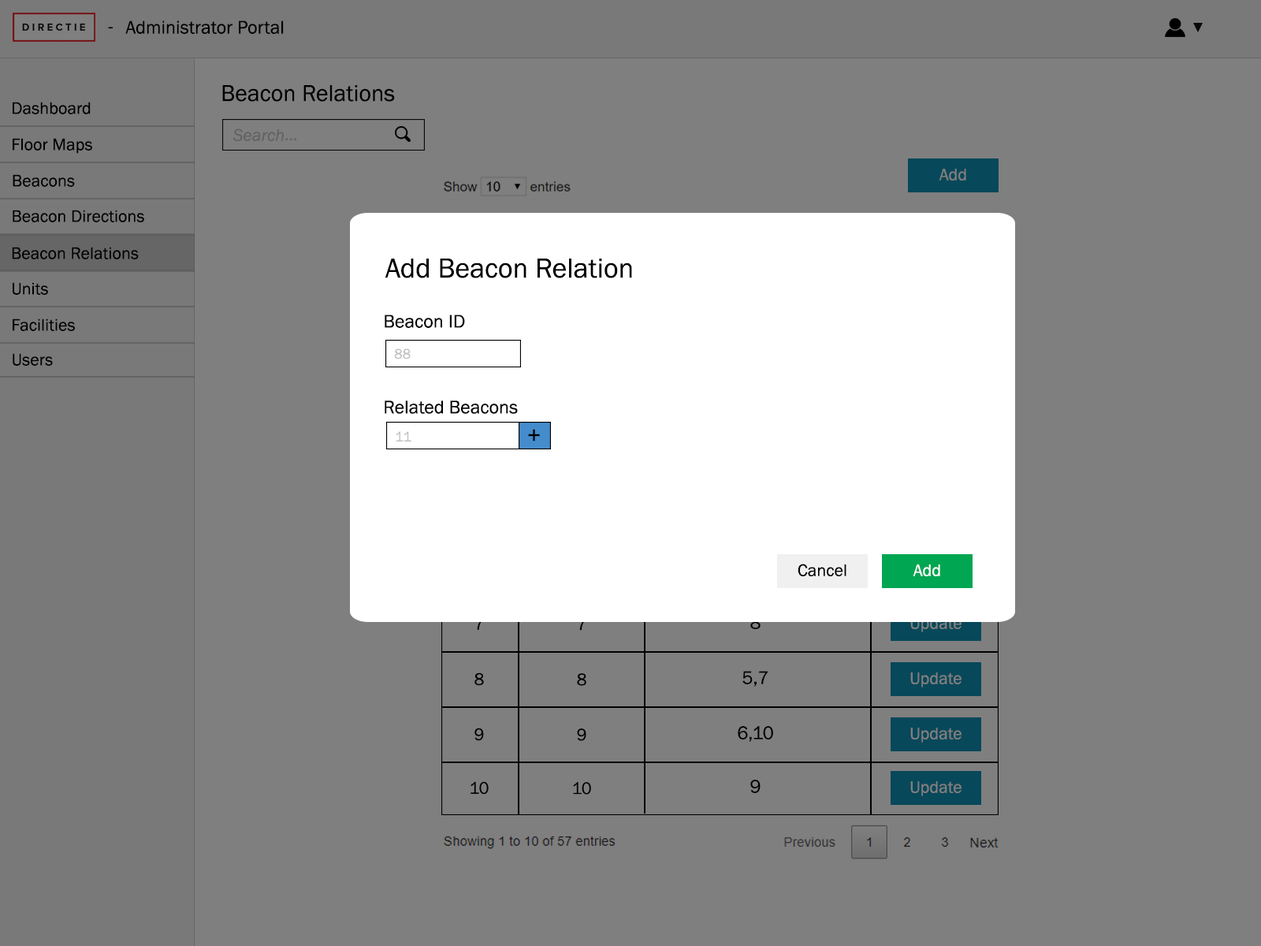
<style>
.page{position:relative;width:1261px;height:946px;background:#7f7f7f}
.page>*{position:absolute;margin:0}
.t1{font:18.9px "FranklinGothic-Book";color:#000000}
.t2{font:23.6px "FranklinGothic-Book";color:#000000}
.t3{font:17.3px "FranklinGothic-Book";color:#000000}
.t4{font:17.3px "FranklinGothic-Book";color:#7f7f7f}
.t5{font:28.4px "FranklinGothic-Book";color:#000000}
.t6{font:14.2px "FranklinGothic-Book";color:#c2c2c2}
.t7{font:17.3px "FranklinGothic-Book";color:#010101}
.t8{font:17.3px "FranklinGothic-Book";color:#fefefe}
</style>
<div class="page">
<p class="t1" style="left:108px;top:27px;width:5px;height:1px">-</p>
<p class="t1" style="left:125px;top:20px;width:159px;height:14px">Administrator Portal</p>
<p class="t2" style="left:222px;top:85px;width:173px;height:17px">Beacon Relations</p>
<p class="t3" style="left:13px;top:102px;width:78px;height:12px">Dashboard</p>
<p class="t3" style="left:13px;top:138px;width:79px;height:16px">Floor Maps</p>
<p class="t4" style="left:939px;top:169px;width:27px;height:11px">Add</p>
<p class="t3" style="left:13px;top:174px;width:62px;height:13px">Beacons</p>
<p class="t3" style="left:13px;top:210px;width:131px;height:12px">Beacon Directions</p>
<p class="t3" style="left:12px;top:247px;width:127px;height:12px">Beacon Relations</p>
<p class="t5" style="left:385px;top:258px;width:247px;height:20px">Add Beacon Relation</p>
<p class="t3" style="left:13px;top:282px;width:35px;height:13px">Units</p>
<p class="t1" style="left:385px;top:314px;width:80px;height:14px">Beacon ID</p>
<p class="t3" style="left:13px;top:318px;width:62px;height:13px">Facilities</p>
<p class="t3" style="left:13px;top:353px;width:40px;height:13px">Users</p>
<p class="t6" style="left:394px;top:348px;width:17px;height:11px">88</p>
<p class="t1" style="left:385px;top:400px;width:133px;height:14px">Related Beacons</p>
<p class="t6" style="left:396px;top:431px;width:15px;height:10px">11</p>
<p class="t2" style="left:528px;top:429px;width:12px;height:12px">+</p>
<p class="t7" style="left:798px;top:563px;width:48px;height:13px">Cancel</p>
<p class="t8" style="left:913px;top:564px;width:27px;height:12px">Add</p>
<p class="t3" style="left:474px;top:672px;width:10px;height:14px">8</p>
<p class="t3" style="left:577px;top:673px;width:9px;height:13px">8</p>
<p class="t1" style="left:742px;top:671px;width:26px;height:15px">5,7</p>
<p class="t4" style="left:910px;top:672px;width:51px;height:15px">Update</p>
<p class="t1" style="left:738px;top:726px;width:35px;height:16px">6,10</p>
<p class="t3" style="left:474px;top:727px;width:10px;height:14px">9</p>
<p class="t3" style="left:577px;top:728px;width:9px;height:13px">9</p>
<p class="t4" style="left:910px;top:727px;width:51px;height:15px">Update</p>
<p class="t3" style="left:470px;top:781px;width:19px;height:13px">10</p>
<p class="t3" style="left:573px;top:782px;width:18px;height:12px">10</p>
<p class="t1" style="left:750px;top:779px;width:10px;height:14px">9</p>
<p class="t4" style="left:910px;top:781px;width:51px;height:15px">Update</p>
</div>
